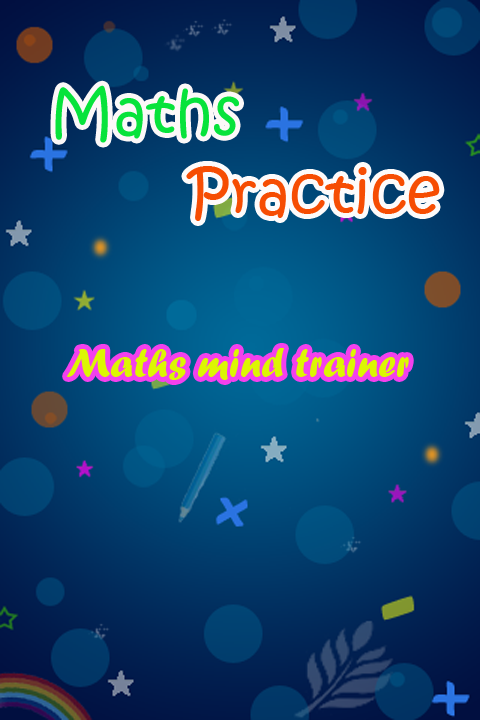
<style>
.page{position:relative;width:480px;height:720px}
.page>*{position:absolute;margin:0}
.t1{font:60px "KristenITC-Regular";color:#07e33b}
.t2{font:60px "KristenITC-Regular";color:#f64d03}
.t3{font:41.4px "ForteMT";color:#dcf603}
</style>
<div class="page">
<p class="t1" style="left:55px;top:85px;width:184px;height:58px">Maths</p>
<p class="t2" style="left:186px;top:166px;width:254px;height:55px">Practice</p>
<p class="t3" style="left:67px;top:348px;width:342px;height:32px">Maths mind trainer</p>
</div>
